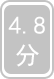
<style>
.page{position:relative;width:54px;height:79px;background:#c3c3c3}
.page>*{position:absolute;margin:0}
.t1{font:24.7px "SimHei";color:#ffffff;text-transform:uppercase}
</style>
<div class="page">
<p class="t1" style="left:8px;top:16px;width:37px;height:51px;text-align:center">4.8<br>分</p>
</div>
